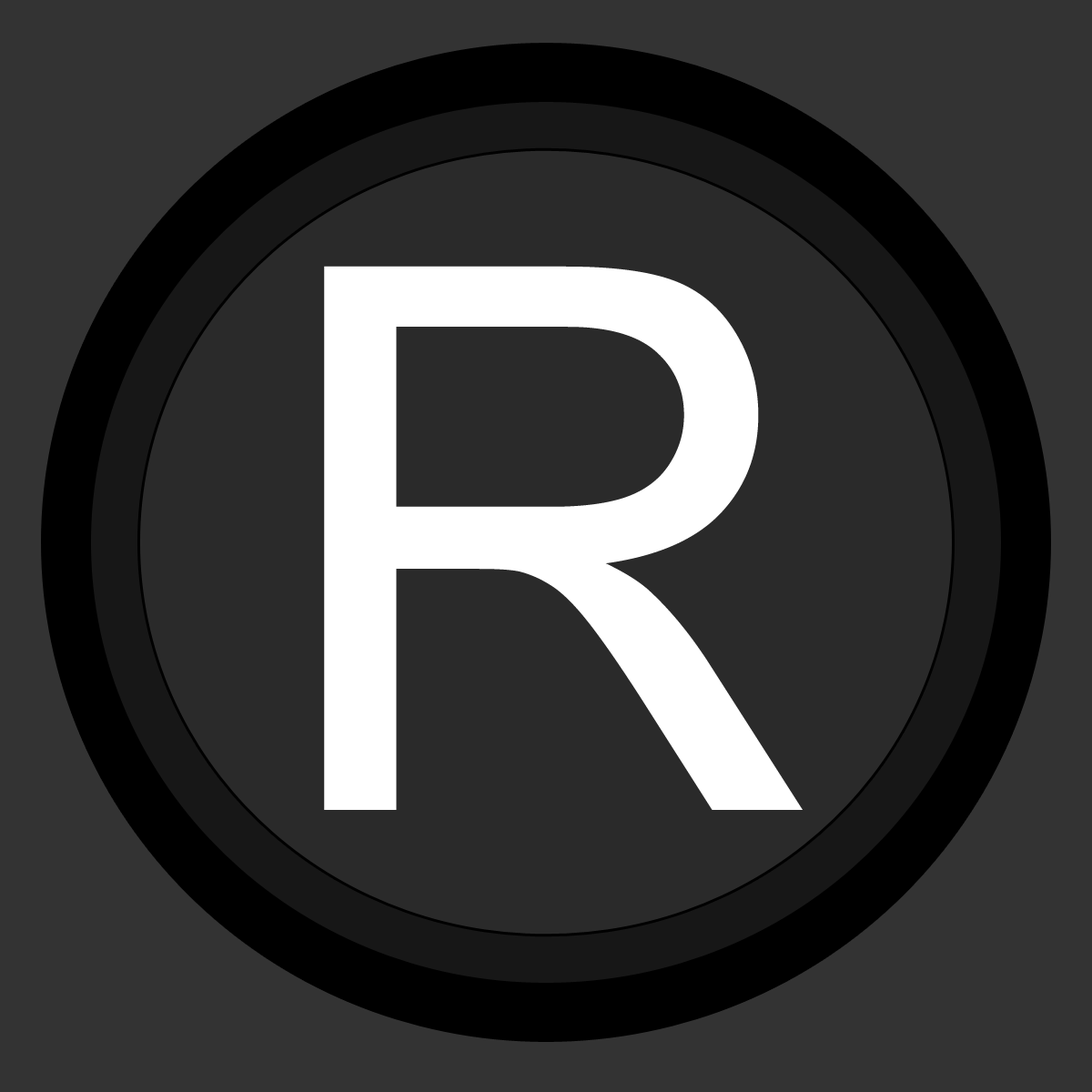
<style>
.page{position:relative;width:1092px;height:1092px;background:#333333}
.page>*{position:absolute;margin:0}
.t1{font:758.3px "ArialMT";color:#ffffff}
</style>
<div class="page">
<p class="t1" style="left:324px;top:266px;width:479px;height:544px">R</p>
</div>
